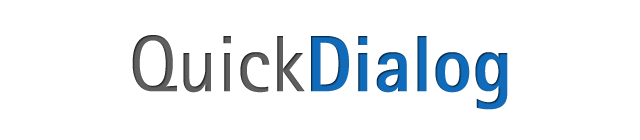
<style>
.page{position:relative;width:640px;height:140px;background:#ffffff}
.page>*{position:absolute;margin:0}
.t1{font:80px "AgfaRotisSansSerifExBd";color:#106cba}
.t2{font:80px "AgfaRotisSansSerif";color:#5f5f5f}
</style>
<div class="page">
<p class="t1" style="left:132px;top:35px;width:376px;height:75px"><span class="t2">Quick</span>Dialog</p>
</div>
